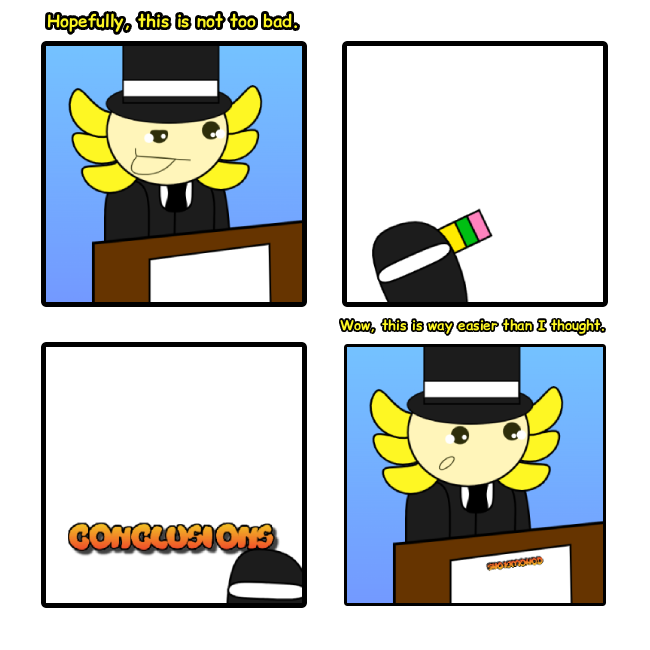
<style>
.page{position:relative;width:650px;height:650px;background:#ffffff}
.page>*{position:absolute;margin:0}
.t1{font:16.9px "ComicRelief-Bold";color:#fdf623}
.t2{font:13.4px "ComicRelief-Bold";color:#fdf623}
</style>
<div class="page">
<p class="t1" style="left:47px;top:13px;width:251px;height:19px">Hopefully, this is not too bad.</p>
<p class="t2" style="left:340px;top:319px;width:264px;height:15px">Wow, this is way easier than I thought.</p>
</div>
